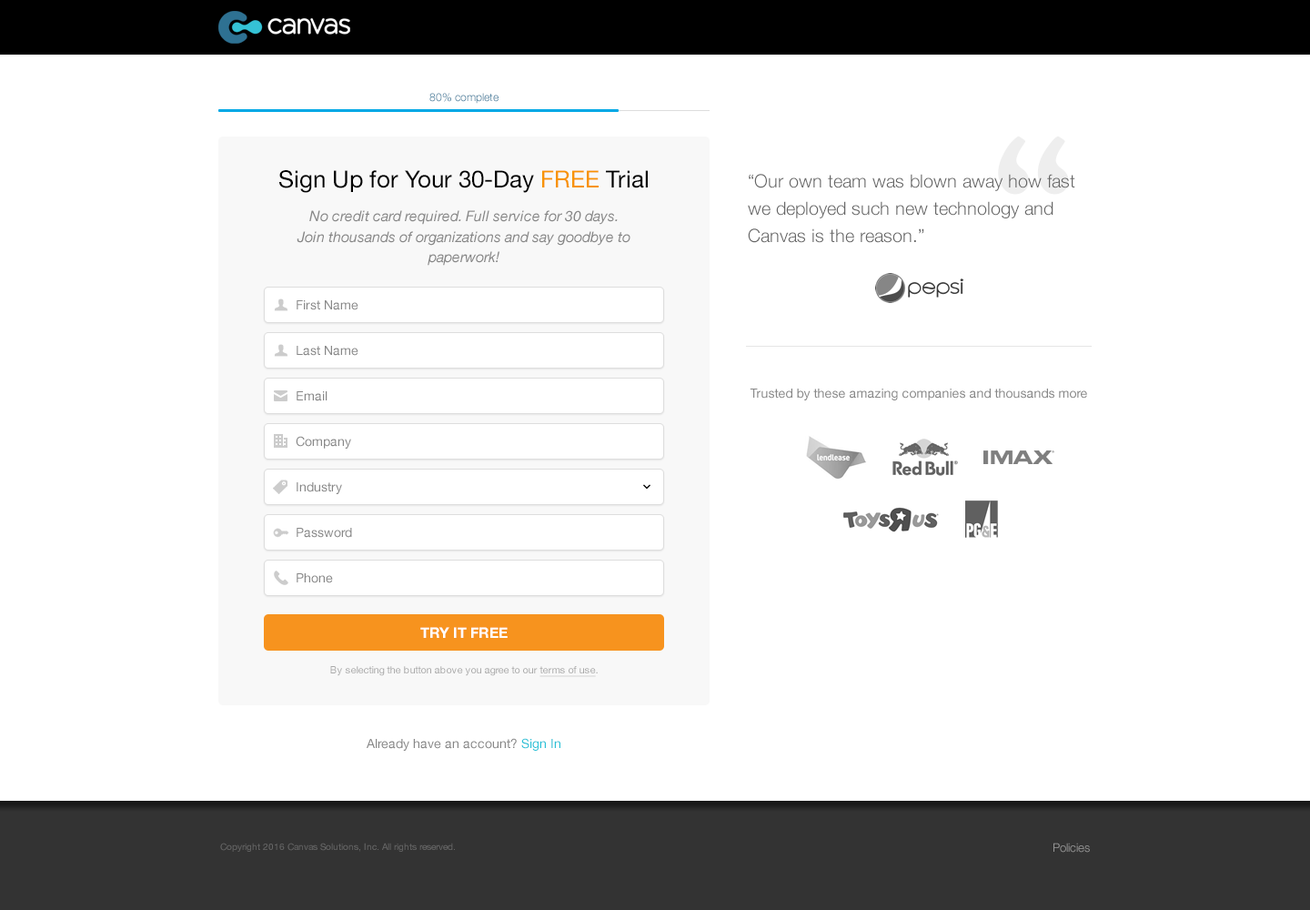
<style>
.page{position:relative;width:1310px;height:910px;background:#ffffff}
.page>*{position:absolute;margin:0}
.t1{font:10.9px "HelveticaNeue-Light"}
.t2{font:23.7px "HelveticaNeue";color:#000000}
.t3{font:23.7px "HelveticaNeue";color:#f89300}
.t4{font:18.2px/27.3px "HelveticaNeue-Light";color:#666666}
.t5{font:14.6px/20.4px "HelveticaNeue-Italic";color:#878787}
.t6{font:12.7px "HelveticaNeue";color:#888888}
.t7{font:12.7px "HelveticaNeue";color:#878787}
.t8{font:14.6px "HelveticaNeue-Bold";color:#ffffff}
.t9{font:10px "HelveticaNeue";color:#aaaaaa}
.t10{font:10px "HelveticaNeue";color:#aaaaaa;text-decoration:underline}
.t11{font:12.7px "HelveticaNeue";color:#28c1d7}
.t12{font:9.1px "HelveticaNeue";color:#666666}
.t13{font:11.8px "HelveticaNeue-Light";color:#999999}
</style>
<div class="page">
<p class="t1" style="left:430px;top:93px;width:69px;height:11px">80% complete</p>
<p class="t2" style="left:279px;top:170px;width:369px;height:23px">Sign Up for Your 30-Day <span class="t3">FREE </span>Trial</p>
<p class="t4" style="left:748px;top:174px;width:328px;height:69px">“Our own team was blown away how fast we deployed such new technology and Canvas is the reason.”</p>
<p class="t5" style="left:297px;top:210px;width:334px;height:56px;text-align:center">No credit card required. Full service for 30 days. <br>Join thousands of organizations and say goodbye to paperwork!</p>
<p class="t6" style="left:297px;top:300px;width:62px;height:10px">First Name</p>
<p class="t7" style="left:297px;top:346px;width:62px;height:10px">Last Name</p>
<p class="t6" style="left:750px;top:389px;width:337px;height:11px">Trusted by these amazing companies and thousands more</p>
<p class="t7" style="left:297px;top:391px;width:31px;height:10px">Email</p>
<p class="t7" style="left:296px;top:436px;width:55px;height:13px">Company</p>
<p class="t7" style="left:297px;top:482px;width:45px;height:12px">Industry</p>
<p class="t7" style="left:297px;top:528px;width:55px;height:10px">Password</p>
<p class="t7" style="left:297px;top:573px;width:36px;height:10px">Phone</p>
<p class="t8" style="left:420px;top:627px;width:88px;height:11px">TRY IT FREE</p>
<p class="t9" style="left:330px;top:666px;width:268px;height:11px">By selecting the button above you agree to our <span class="t10">terms of use</span>.</p>
<p class="t7" style="left:367px;top:738px;width:194px;height:13px">Already have an account? <span class="t11">Sign In</span></p>
<p class="t12" style="left:220px;top:843px;width:235px;height:9px">Copyright 2016 Canvas Solutions, Inc. All rights reserved.</p>
<p class="t13" style="left:1054px;top:843px;width:36px;height:10px">Policies</p>
</div>
